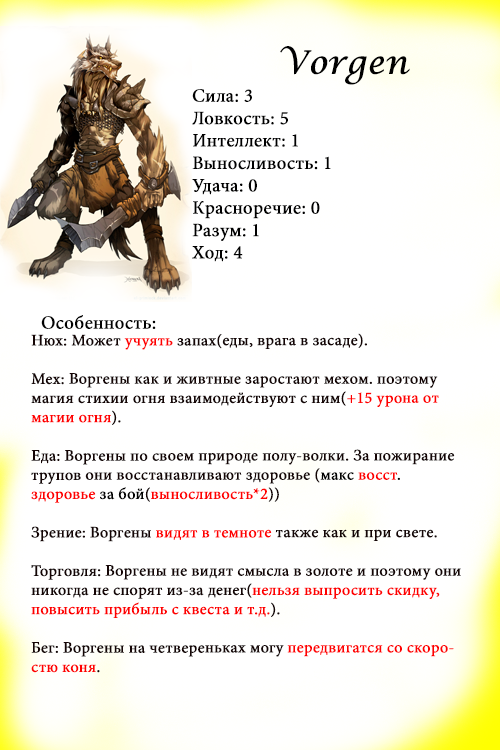
<style>
.page{position:relative;width:500px;height:750px;background:#ffffff}
.page>*{position:absolute;margin:0}
.t1{font:32px "LucidaCalligraphy-Italic";color:#000000;font-weight:bold}
.t2{font:18.7px "MinionPro-Regular";color:#000000;font-weight:bold}
.t3{font:16px "MinionPro-Regular";color:#150505;font-weight:bold}
.t4{font:16px "MinionPro-Regular";color:#ff0000;font-weight:bold}
.t5{font:16px "MinionPro-Regular";color:#000000;font-weight:bold}
.t6{font:16px "MinionPro-Regular";color:#fe0000;font-weight:bold}
.t7{font:16px "MinionPro-Regular";color:#080303;font-weight:bold}
</style>
<div class="page">
<p class="t1" style="left:280px;top:46px;width:130px;height:39px">Vorgen</p>
<p class="t2" style="left:192px;top:89px;width:139px;height:173px">Сила: 3<br>Ловкость: 5<br>Интеллект: 1<br>Выносливость: 1<br>Удача: 0<br>Красноречие: 0<br>Разум: 1<br>Ход: 4</p>
<p class="t2" style="left:41px;top:315px;width:115px;height:14px">Особенность:</p>
<p class="t3" style="left:31px;top:333px;width:430px;height:340px">Нюх: Может <span class="t4">учуять</span> запах(еды, врага в засаде).<br><br>Мех: Воргены как и живтные заростают мехом. поэтому магия стихии огня взаимодействуют с ним(<span class="t4">+15 урона от магии огня</span>).<br><br>Еда: Воргены по своем природе полу-волки. За пожирание трупов они восстанавливают здоровье (<span class="t5">макс</span><span class="t6"> восст</span><span class="t7">. <br></span><span class="t6">здоровье </span><span class="t5">за бой</span>(<span class="t4">выносливость*2</span>))<br><br>Зрение: Воргены <span class="t4">видят в темноте</span> также как и при свете.<br><br>Торговля: Воргены не видят смысла в золоте и поэтому они никогда не спорят из-за денег(<span class="t6">нельзя выпросить скидку, повысить прибыль с квеста и т.д.</span>).<br><br>Бег: Воргены на четвереньках могу <span class="t4">передвигатся со скоростю коня</span>.</p>
</div>
